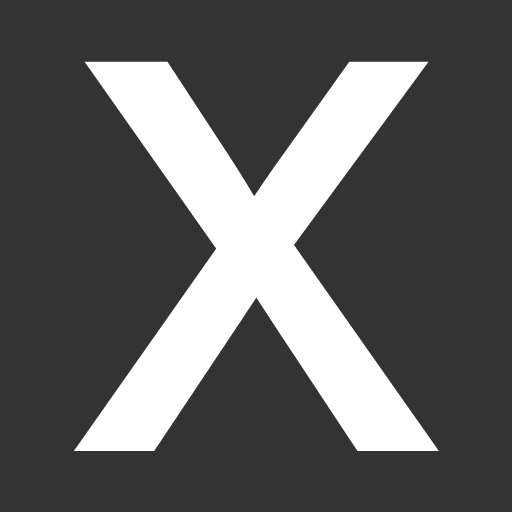
<style>
.page{position:relative;width:512px;height:512px;background:#333333}
.page>*{position:absolute;margin:0}
.t1{font:750px "ArialMT";color:#ffffff}
</style>
<div class="page">
<p class="t1" style="left:74px;top:61px;width:365px;height:390px">x</p>
</div>
